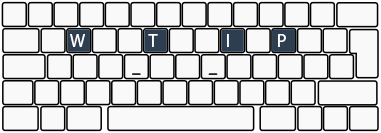
<style>
.page{position:relative;width:381px;height:133px;background:#f9f9f9}
.page>*{position:absolute;margin:0}
.t1{font:18px "MyriadPro-Regular";color:#ffffff}
</style>
<div class="page">
<p class="t1" style="left:70px;top:34px;width:15px;height:13px">W</p>
<p class="t1" style="left:148px;top:34px;width:10px;height:13px">T</p>
<p class="t1" style="left:227px;top:34px;width:2px;height:13px">I</p>
<p class="t1" style="left:278px;top:34px;width:8px;height:13px">P</p>
</div>
